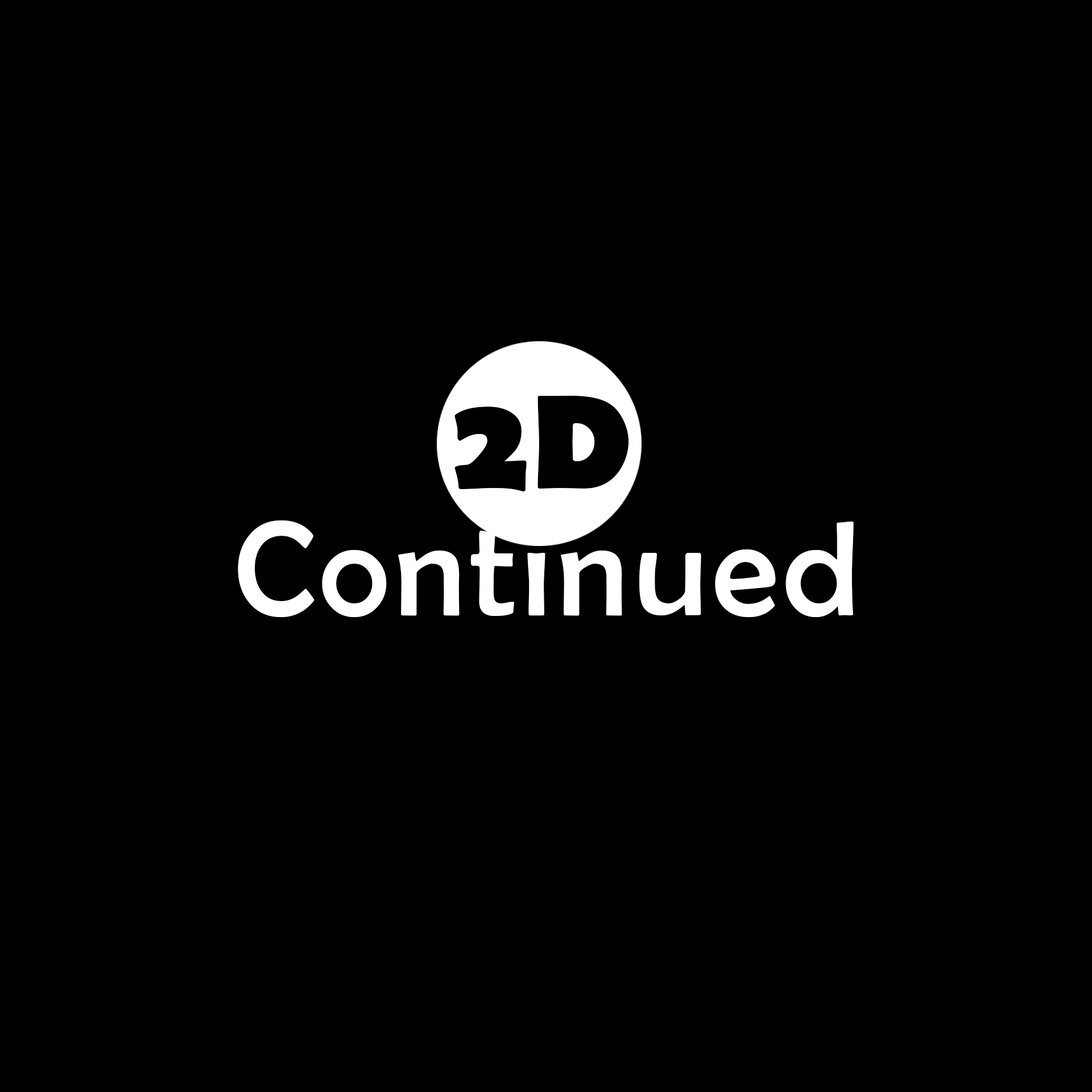
<style>
.page{position:relative;width:1092px;height:1092px;background:#000000}
.page>*{position:absolute;margin:0}
.t1{font:135.1px "BerlinSansFB-Bold";letter-spacing:0.04em;color:#000000}
.t2{font:135.1px "BerlinSansFB-Reg";letter-spacing:0.04em;color:#ffffff}
</style>
<div class="page">
<p class="t1" style="left:454px;top:395px;width:175px;height:96px">2D</p>
<p class="t2" style="left:238px;top:520px;width:616px;height:97px">Continued</p>
</div>
